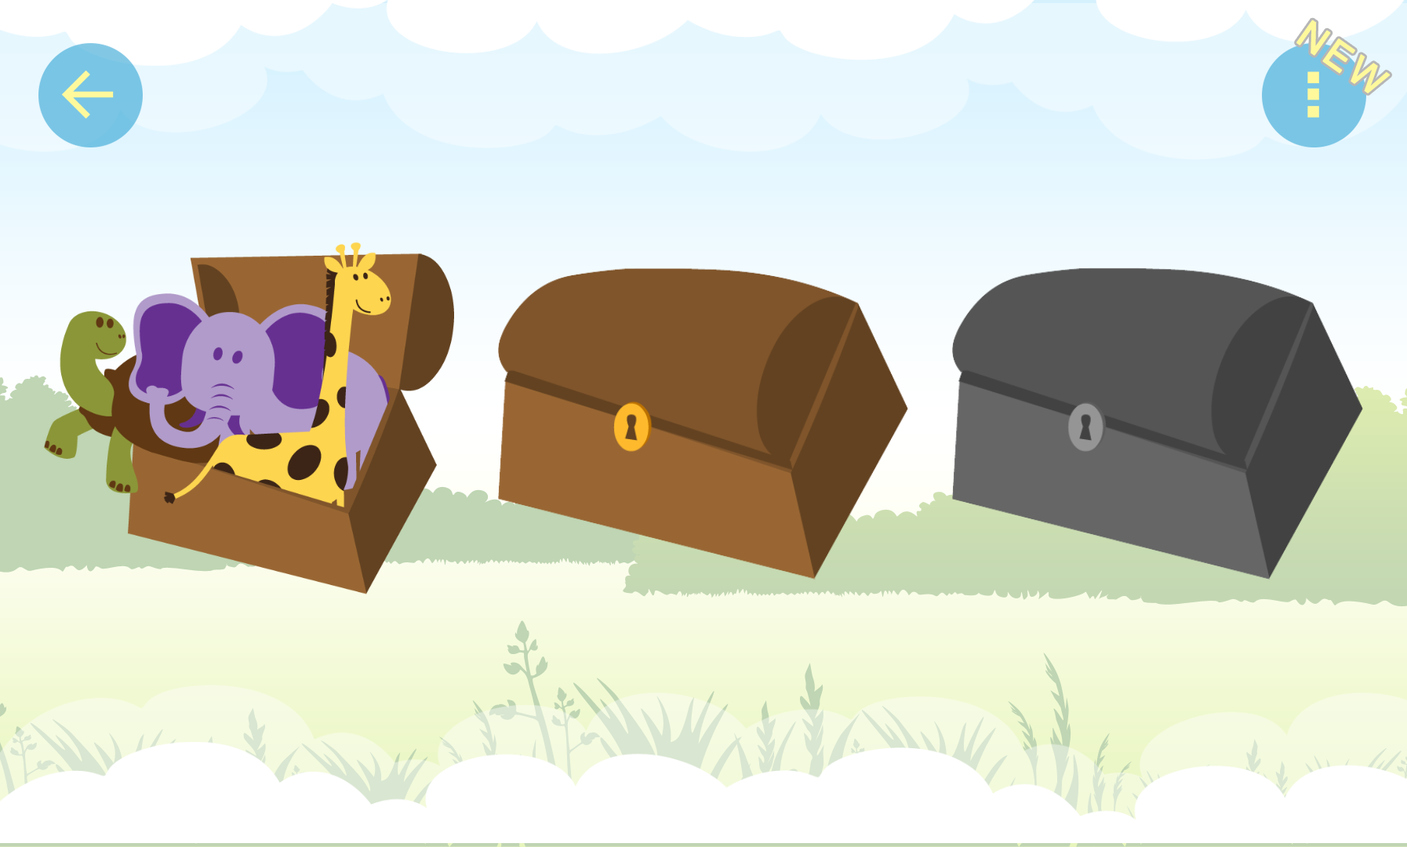
<style>
.page{position:relative;width:1407px;height:847px}
.page>*{position:absolute;margin:0}
.t1{font:37.7px "ArialMT";letter-spacing:0.1em;color:#fff99c;font-weight:bold}
</style>
<div class="page">
<p class="t1" style="left:1297px;top:20px;width:94px;height:73px;rotate:35deg">NEW</p>
</div>
